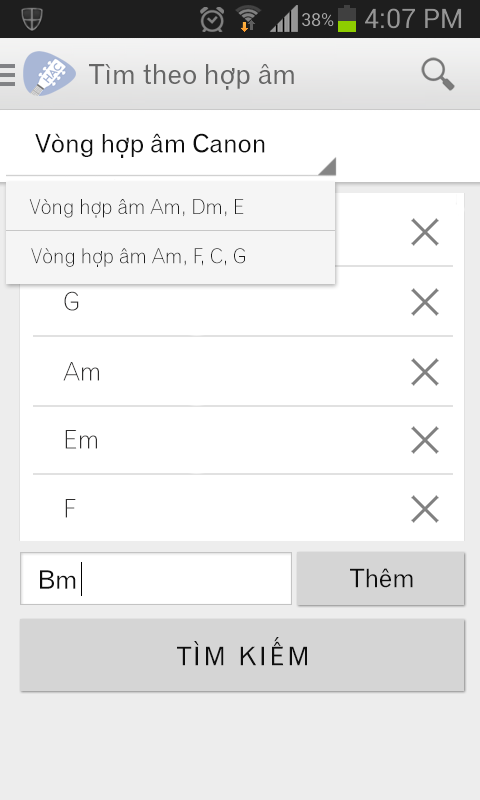
<style>
.page{position:relative;width:480px;height:800px;background:#ffffff}
.page>*{position:absolute;margin:0}
.t1{font:27px "UVNGioMay";color:#666666}
.t2{font:25px "UVNGioMay";color:#0e0e0e}
.t3{font:20px "UVNGioMayNhe";color:#1e1e1e}
.t4{font:25px "UVNGioMayNhe";color:#2f2e2e}
.t5{font:25px "UVNGioMay";letter-spacing:0.12em;color:#0e0e0e}
</style>
<div class="page">
<p class="t1" style="left:89px;top:64px;width:205px;height:26px">Tìm theo hợp âm</p>
<p class="t2" style="left:35px;top:133px;width:230px;height:25px">Vòng hợp âm Canon</p>
<p class="t3" style="left:29px;top:199px;width:215px;height:19px">Vòng hợp âm Am, Dm, E</p>
<p class="t3" style="left:31px;top:248px;width:214px;height:19px">Vòng hợp âm Am, F, C, G</p>
<p class="t4" style="left:64px;top:291px;width:15px;height:20px">G</p>
<p class="t4" style="left:63px;top:362px;width:36px;height:19px">Am</p>
<p class="t4" style="left:65px;top:430px;width:32px;height:19px">Em</p>
<p class="t4" style="left:65px;top:499px;width:11px;height:19px">F</p>
<p class="t2" style="left:350px;top:568px;width:63px;height:20px">Thêm</p>
<p class="t2" style="left:40px;top:570px;width:36px;height:19px">Bm</p>
<p class="t5" style="left:177px;top:637px;width:130px;height:29px">TÌM KIẾM</p>
</div>
